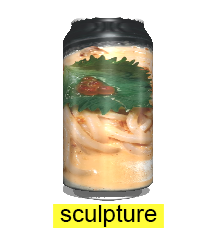
<style>
.page{position:relative;width:216px;height:232px;background:#ffffff}
.page>*{position:absolute;margin:0}
.t1{font:24px "ArialMT";color:#000000}
</style>
<div class="page">
<p class="t1" style="left:60px;top:204px;width:97px;height:23px">sculpture</p>
</div>
